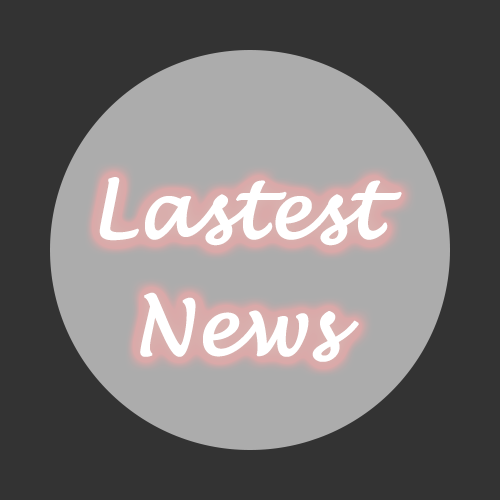
<style>
.page{position:relative;width:500px;height:500px;background:#333333}
.page>*{position:absolute;margin:0}
.t1{font:75px/116.7px "LucidaHandwriting-Italic";color:#ffffff;font-weight:bold}
</style>
<div class="page">
<p class="t1" style="left:99px;top:177px;width:303px;height:185px;text-align:center">Lastest<br>News</p>
</div>
